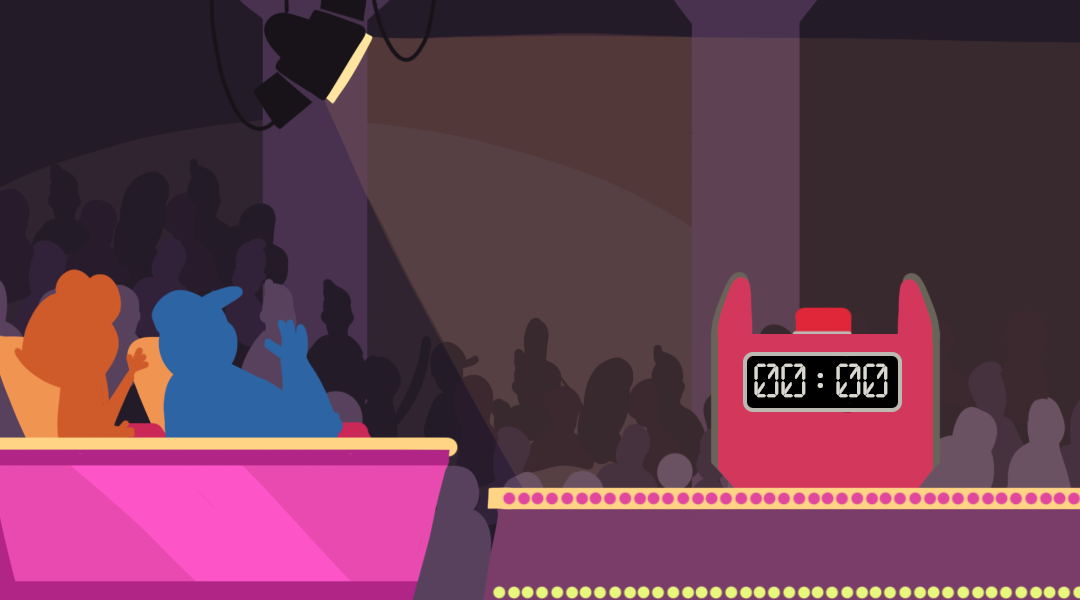
<style>
.page{position:relative;width:1080px;height:600px}
.page>*{position:absolute;margin:0}
.t1{font:34.5px "Digitaldream";color:#d2d2d2}
</style>
<div class="page">
<p class="t1" style="left:754px;top:363px;width:134px;height:35px">00:00</p>
</div>
